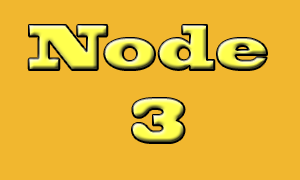
<style>
.page{position:relative;width:300px;height:180px;background:#f1b72f}
.page>*{position:absolute;margin:0}
.t1{font:60.4px "BlackoakStd";scale:0.66 1}
</style>
<div class="page">
<p class="t1" style="left:28px;top:25px;width:239px;height:118px;text-align:center">Node <br>3</p>
</div>
